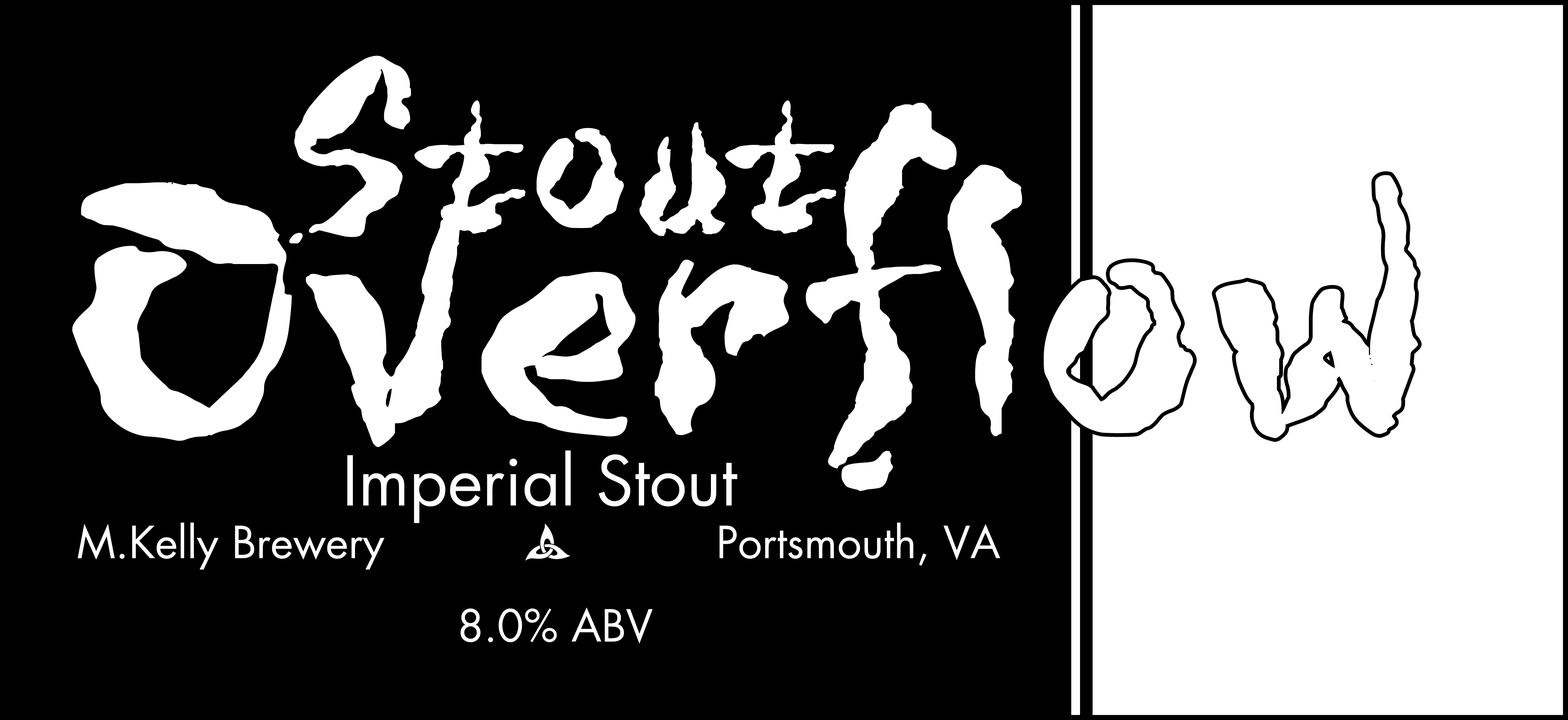
<style>
.page{position:relative;width:1568px;height:720px;background:#000000}
.page>*{position:absolute;margin:0}
.t1{font:265.3px "WILD3InfectedHurtNormal";color:#ffffff}
.t2{font:453.4px "WILD3InfectedHurtNormal";color:#ffffff}
.t3{font:66.6px "FuturaLT-Book";color:#ffffff}
.t4{font:43.1px "FuturaLT-Book";color:#ffffff}
</style>
<div class="page">
<p class="t1" style="left:289px;top:56px;width:547px;height:188px">Stout</p>
<p class="t2" style="left:72px;top:103px;width:1346px;height:388px">Overflow</p>
<p class="t3" style="left:347px;top:450px;width:390px;height:73px">Imperial Stout</p>
<p class="t4" style="left:77px;top:522px;width:923px;height:48px">M.Kelly Brewery                         Portsmouth, VA</p>
<p class="t4" style="left:460px;top:607px;width:193px;height:37px">8.0% ABV</p>
</div>
